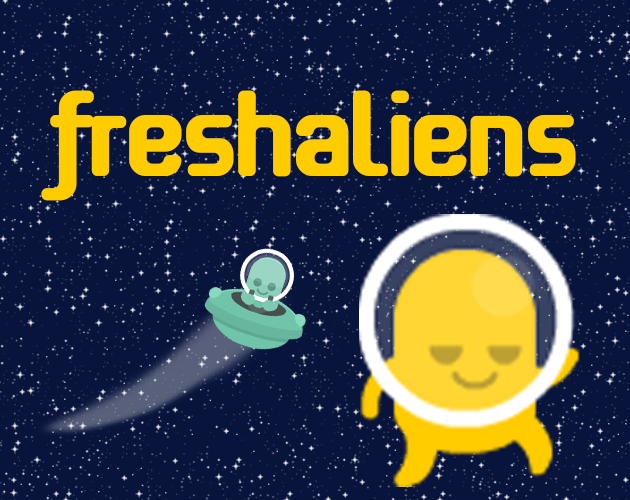
<style>
.page{position:relative;width:630px;height:500px;background:#08143c}
.page>*{position:absolute;margin:0}
.t1{font:110px "effortless";color:#ffcc00}
</style>
<div class="page">
<p class="t1" style="left:41px;top:90px;width:535px;height:111px">freshaliens</p>
</div>
